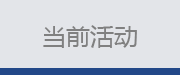
<style>
.page{position:relative;width:180px;height:75px;background:#e3e5e9}
.page>*{position:absolute;margin:0}
.t1{font:24px "MicrosoftYaHei";color:#808080}
</style>
<div class="page">
<p class="t1" style="left:43px;top:25px;width:94px;height:23px">当前活动</p>
</div>
